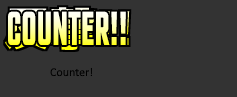
<style>
.page{position:relative;width:237px;height:97px;background:#333333}
.page>*{position:absolute;margin:0}
.t1{font:51.9px "Teko-Semibold";font-weight:bold;scale:0.6 1}
</style>
<div class="page">
<p class="t1" style="left:8px;top:11px;width:118px;height:34px">COUNTER!!</p>
</div>
